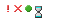
<style>
.page{position:relative;width:60px;height:20px;background:#ffffff}
.page>*{position:absolute;margin:0}
.t1{font:10px "Tahoma-Bold";scale:1.2 1}
.t2{font:9.6px "Tahoma-Bold";scale:1.38 1}
</style>
<div class="page">
<p class="t1" style="left:7px;top:5px;width:2px;height:7px">!</p>
<p class="t2" style="left:14px;top:5px;width:8px;height:7px">X</p>
</div>
